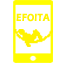
<style>
.page{position:relative;width:64px;height:64px;background:#ffffff}
.page>*{position:absolute;margin:0}
.t1{font:10.7px "ErasITC-Bold";color:#fff200;text-transform:uppercase;scale:0.8 1}
</style>
<div class="page">
<p class="t1" style="left:16px;top:13px;width:34px;height:9px">Efoita</p>
</div>
